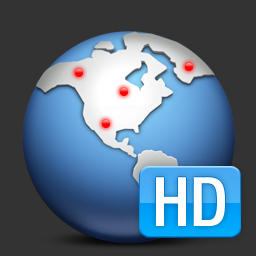
<style>
.page{position:relative;width:256px;height:256px;background:#333333}
.page>*{position:absolute;margin:0}
.t1{font:68.1px "HelveticaNeueLTPro-MdCn";color:#ffffff}
</style>
<div class="page">
<p class="t1" style="left:156px;top:177px;width:69px;height:49px">HD</p>
</div>
